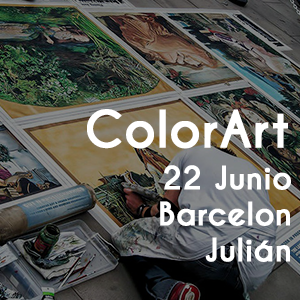
<style>
.page{position:relative;width:300px;height:300px}
.page>*{position:absolute;margin:0}
.t1{font:48px "CaviarDreams-Bold";color:#ffffff;font-weight:bold}
.t2{font:30px "CaviarDreams-Bold";color:#ffffff;font-weight:bold}
</style>
<div class="page">
<p class="t1" style="left:87px;top:109px;width:201px;height:40px">ColorArt</p>
<p class="t2" style="left:160px;top:165px;width:131px;height:97px;text-align:right">22 Junio<br>Barcelon<br>Julián</p>
</div>
